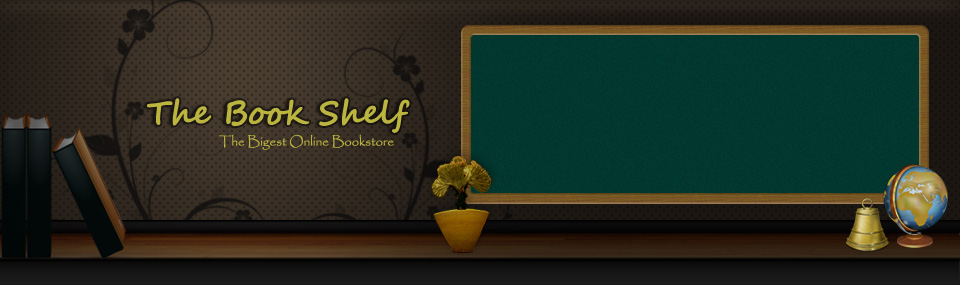
<style>
.page{position:relative;width:960px;height:285px}
.page>*{position:absolute;margin:0}
.t1{font:33px "SegoeScript-Bold";color:#bbb43f}
.t2{font:13px "Papyrus-Regular";color:#bbb43f}
</style>
<div class="page">
<p class="t1" style="left:147px;top:98px;width:263px;height:35px">The Book Shelf</p>
<p class="t2" style="left:219px;top:134px;width:175px;height:16px">The Bigest Online Bookstore</p>
</div>
